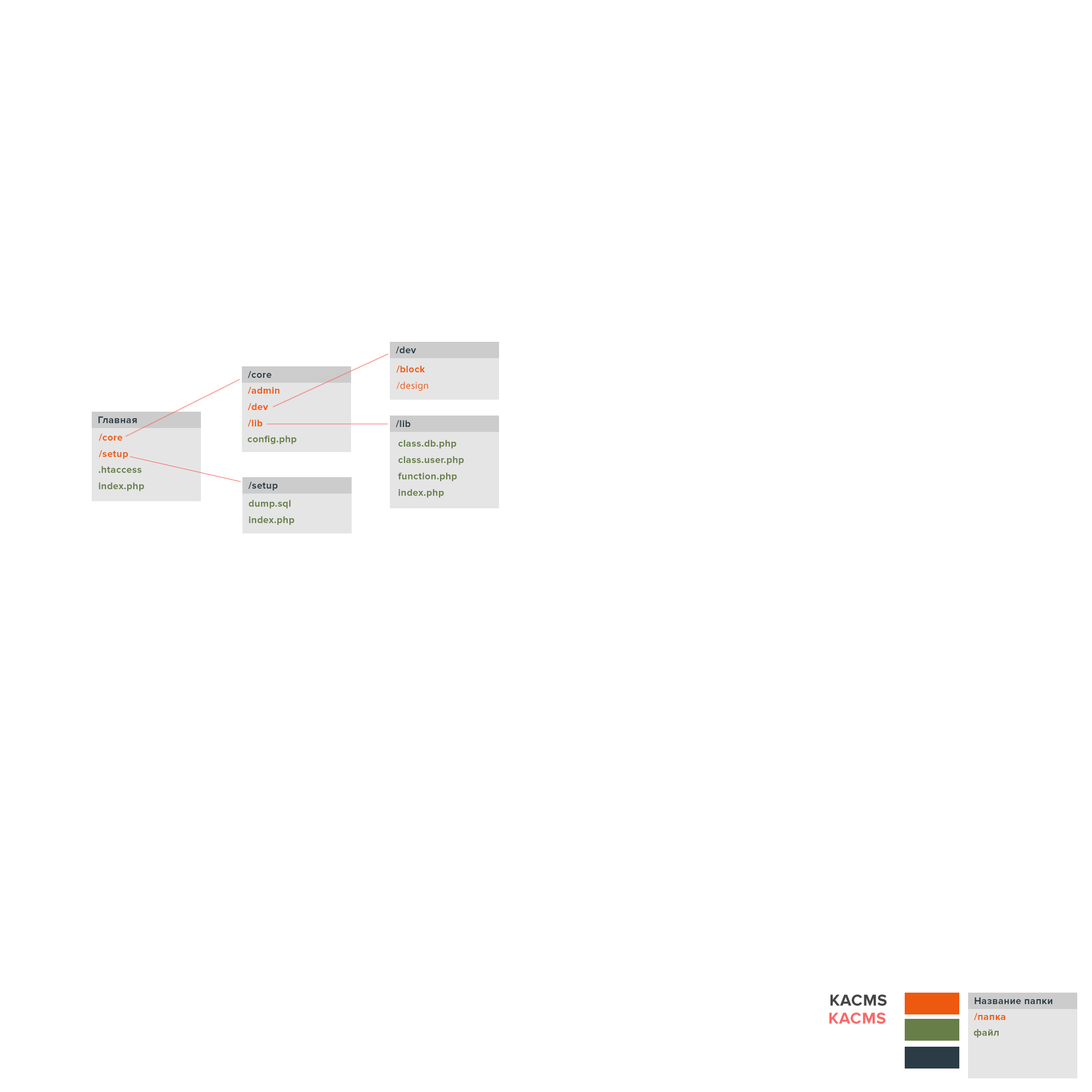
<style>
.page{position:relative;width:1092px;height:1092px;background:#ffffff}
.page>*{position:absolute;margin:0}
.t1{font:9.8px "ProximaNova-Bold";letter-spacing:0.025em;color:#2b3c46}
.t2{font:9.8px "ProximaNova-Bold";letter-spacing:0.025em;color:#ed590f}
.t3{font:9.8px "ProximaNova-Bold";letter-spacing:0.025em;color:#677e48}
.t4{font:16.4px "ProximaNova-Bold";letter-spacing:0.025em;color:#fb6868}
</style>
<div class="page">
<p class="t1" style="left:396px;top:346px;width:20px;height:8px">/dev</p>
<p class="t2" style="left:396px;top:365px;width:29px;height:8px">/block</p>
<p class="t1" style="left:248px;top:371px;width:23px;height:7px">/core</p>
<p class="t2" style="left:248px;top:387px;width:32px;height:7px">/admin</p>
<p class="t2" style="left:396px;top:382px;width:32px;height:9px">/design</p>
<p class="t2" style="left:248px;top:403px;width:20px;height:8px">/dev</p>
<p class="t1" style="left:98px;top:416px;width:39px;height:7px">Главная</p>
<p class="t2" style="left:248px;top:419px;width:15px;height:8px">/lib</p>
<p class="t1" style="left:396px;top:420px;width:15px;height:8px">/lib</p>
<p class="t2" style="left:99px;top:434px;width:23px;height:7px">/core</p>
<p class="t3" style="left:247px;top:435px;width:49px;height:9px">config.php</p>
<p class="t2" style="left:99px;top:450px;width:29px;height:9px">/setup</p>
<p class="t3" style="left:398px;top:440px;width:58px;height:9px">class.db.php</p>
<p class="t3" style="left:398px;top:456px;width:66px;height:9px">class.user.php</p>
<p class="t3" style="left:98px;top:466px;width:43px;height:7px">.htaccess</p>
<p class="t3" style="left:398px;top:472px;width:59px;height:10px">function.php</p>
<p class="t3" style="left:99px;top:482px;width:45px;height:9px">index.php</p>
<p class="t1" style="left:248px;top:482px;width:30px;height:9px">/setup</p>
<p class="t3" style="left:399px;top:489px;width:45px;height:9px">index.php</p>
<p class="t3" style="left:248px;top:500px;width:42px;height:9px">dump.sql</p>
<p class="t3" style="left:249px;top:516px;width:45px;height:9px">index.php</p>
<p class="t1" style="left:975px;top:997px;width:78px;height:7px">Название папки</p>
<p class="t4" style="left:829px;top:1012px;width:57px;height:12px">KACMS</p>
<p class="t2" style="left:974px;top:1013px;width:31px;height:7px">/папка</p>
<p class="t3" style="left:974px;top:1029px;width:25px;height:9px">файл</p>
</div>
